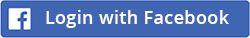
<style>
.page{position:relative;width:250px;height:38px;background:#4065b3}
.page>*{position:absolute;margin:0}
.t1{font:18px "OpenSans-Semibold";letter-spacing:0.02em;color:#fefefe}
</style>
<div class="page">
<p class="t1" style="left:46px;top:10px;width:183px;height:18px">Login with Facebook</p>
</div>
